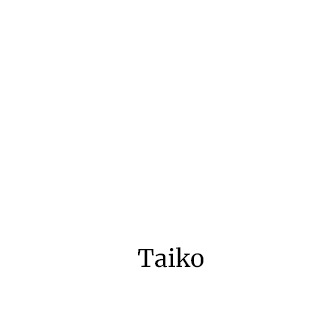
<style>
.page{position:relative;width:328px;height:327px;background:#ffffff}
.page>*{position:absolute;margin:0}
.t1{font:24px "Merriweather-Regular";color:#000000}
</style>
<div class="page">
<p class="t1" style="left:138px;top:247px;width:66px;height:21px">Taiko</p>
</div>
